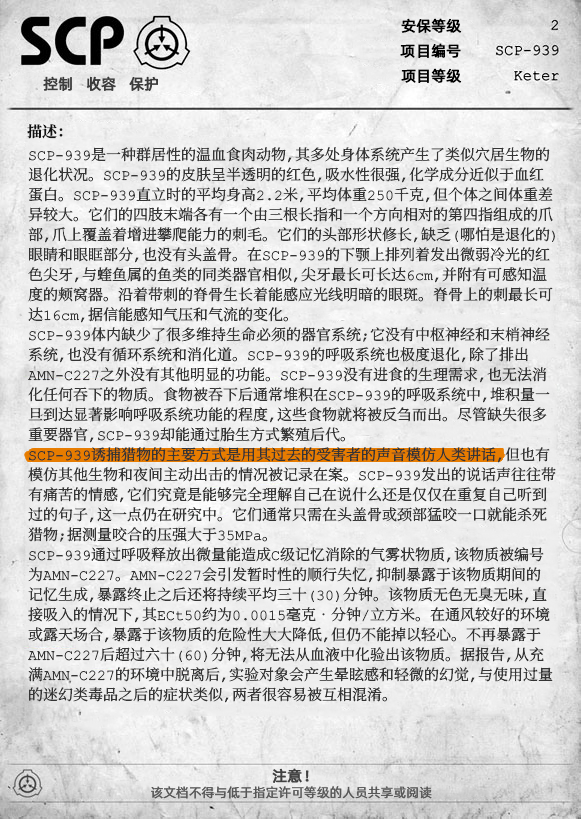
<style>
.page{position:relative;width:581px;height:819px}
.page>*{position:absolute;margin:0}
.t1{font:15px "AlibabaPuHuiTiR";color:#000000;font-weight:bold}
.t2{font:15px "AlibabaPuHuiTiR";color:#3d3d3d;font-weight:bold}
.t3{font:15px "ContainmentBreach-Bold";color:#121212}
.t4{font:15px/20px "ContainmentBreach-Regular";color:#353535}
.t5{font:15px "AlibabaPuHuiTiR";color:#414141;font-weight:bold}
.t6{font:13px "AlibabaPuHuiTiR";color:#575757}
</style>
<div class="page">
<p class="t1" style="left:401px;top:18px;width:61px;height:15px">安保等级</p>
<p class="t1" style="left:400px;top:43px;width:61px;height:15px">项目编号</p>
<p class="t2" style="left:43px;top:76px;width:115px;height:15px">控制   收容   保护</p>
<p class="t1" style="left:401px;top:68px;width:61px;height:15px">项目等级</p>
<p class="t3" style="left:27px;top:124px;width:36px;height:15px">描述：</p>
<p class="t4" style="left:28px;top:147px;width:528px;height:556px">SCP-939是一种群居性的温血食肉动物，其多处身体系统产生了类似穴居生物的<br>退化状况。SCP-939的皮肤呈半透明的红色，吸水性很强，化学成分近似于血红<br>蛋白。SCP-939直立时的平均身高2.2米，平均体重250千克，但个体之间体重差<br>异较大。它们的四肢末端各有一个由三根长指和一个方向相对的第四指组成的爪<br>部，爪上覆盖着增进攀爬能力的刺毛。它们的头部形状修长，缺乏（哪怕是退化的）<br>眼睛和眼眶部分，也没有头盖骨。在SCP-939的下颚上排列着发出微弱冷光的红<br>色尖牙，与蝰鱼属的鱼类的同类器官相似，尖牙最长可长达6cm，并附有可感知温<br>度的颊窝器。沿着带刺的脊骨生长着能感应光线明暗的眼斑。脊骨上的刺最长可<br>达16cm，据信能感知气压和气流的变化。<br>SCP-939体内缺少了很多维持生命必须的器官系统；它没有中枢神经和末梢神经<br>系统，也没有循环系统和消化道。SCP-939的呼吸系统也极度退化，除了排出<br>AMN-C227之外没有其他明显的功能。SCP-939没有进食的生理需求，也无法消<br>化任何吞下的物质。食物被吞下后通常堆积在SCP-939的呼吸系统中，堆积量一<br>旦到达显著影响呼吸系统功能的程度，这些食物就将被反刍而出。尽管缺失很多<br>重要器官，SCP-939却能通过胎生方式繁殖后代。<br>SCP-939诱捕猎物的主要方式是用其过去的受害者的声音模仿人类讲话，但也有<br>模仿其他生物和夜间主动出击的情况被记录在案。SCP-939发出的说话声往往带<br>有痛苦的情感，它们究竟是能够完全理解自己在说什么还是仅仅在重复自己听到<br>过的句子，这一点仍在研究中。它们通常只需在头盖骨或颈部猛咬一口就能杀死<br>猎物；据测量咬合的压强大于35MPa。<br>SCP-939通过呼吸释放出微量能造成C级记忆消除的气雾状物质，该物质被编号<br>为AMN-C227。AMN-C227会引发暂时性的顺行失忆，抑制暴露于该物质期间的<br>记忆生成，暴露终止之后还将持续平均三十（30）分钟。该物质无色无臭无味，直<br>接吸入的情况下，其ECt50约为0.0015毫克•分钟/立方米。在通风较好的环境<br>或露天场合，暴露于该物质的危险性大大降低，但仍不能掉以轻心。不再暴露于<br>AMN-C227后超过六十（60）分钟，将无法从血液中化验出该物质。据报告，从充<br>满AMN-C227的环境中脱离后，实验对象会产生晕眩感和轻微的幻觉，与使用过量<br>的迷幻类毒品之后的症状类似，两者很容易被互相混淆。</p>
<p class="t5" style="left:272px;top:768px;width:37px;height:15px">注意！</p>
<p class="t6" style="left:151px;top:786px;width:281px;height:13px">该文档不得与低于指定许可等级的人员共享或阅读</p>
</div>
